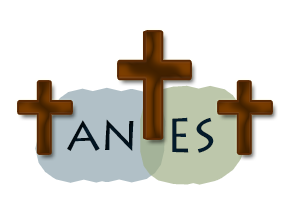
<style>
.page{position:relative;width:300px;height:200px;background:#ffffff}
.page>*{position:absolute;margin:0}
.t1{font:48px "LithosPro-Regular";color:#020f17}
.t2{font:48px "LithosPro-Regular";color:#031a2a}
</style>
<div class="page">
<p class="t1" style="left:67px;top:119px;width:67px;height:32px">an</p>
<p class="t2" style="left:172px;top:117px;width:42px;height:36px">ES</p>
</div>
